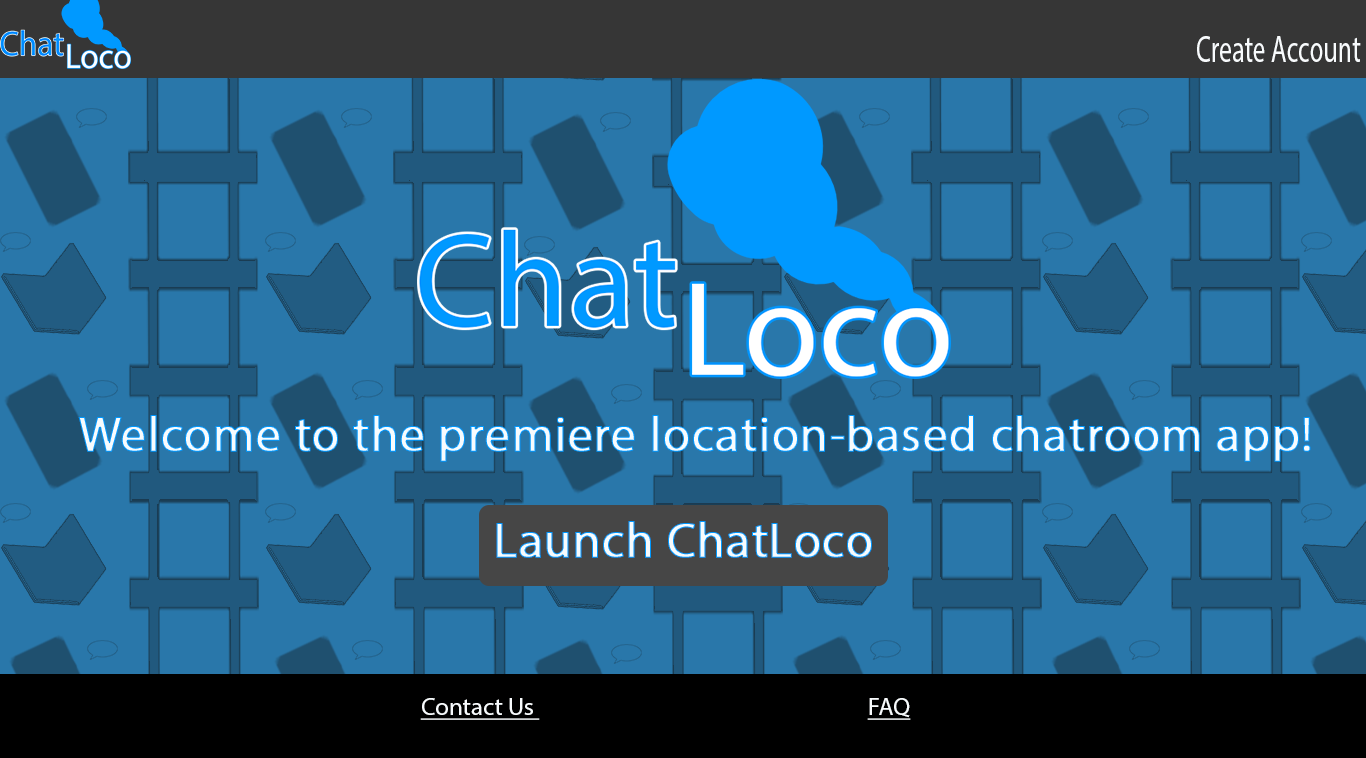
<style>
.page{position:relative;width:1366px;height:758px;background:#2977aa}
.page>*{position:absolute;margin:0}
.t1{font:37.5px "MyriadPro-Regular";color:#f8fbfd;scale:0.69 1}
.t2{font:12px "MyriadPro-Regular";font-weight:bold}
.t3{font:25px "MyriadPro-Regular";color:#f8fbfd;text-decoration:underline}
</style>
<div class="page">
<p class="t1" style="left:1197px;top:36px;width:164px;height:26px">Create Account</p>
<p class="t2" style="left:78px;top:415px;width:1233px;height:47px;text-align:center">Welcome to the premiere location-based chatroom app!</p>
<p class="t3" style="left:420px;top:698px;width:120px;height:22px">Contact Us</p>
<p class="t3" style="left:867px;top:698px;width:44px;height:22px">FAQ</p>
</div>
